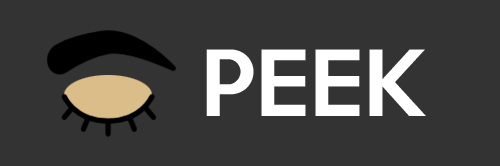
<style>
.page{position:relative;width:500px;height:166px;background:#333333}
.page>*{position:absolute;margin:0}
.t1{font:83.3px "KeepCalm-Medium";color:#ffffff}
</style>
<div class="page">
<p class="t1" style="left:206px;top:49px;width:220px;height:67px">PEEK</p>
</div>
